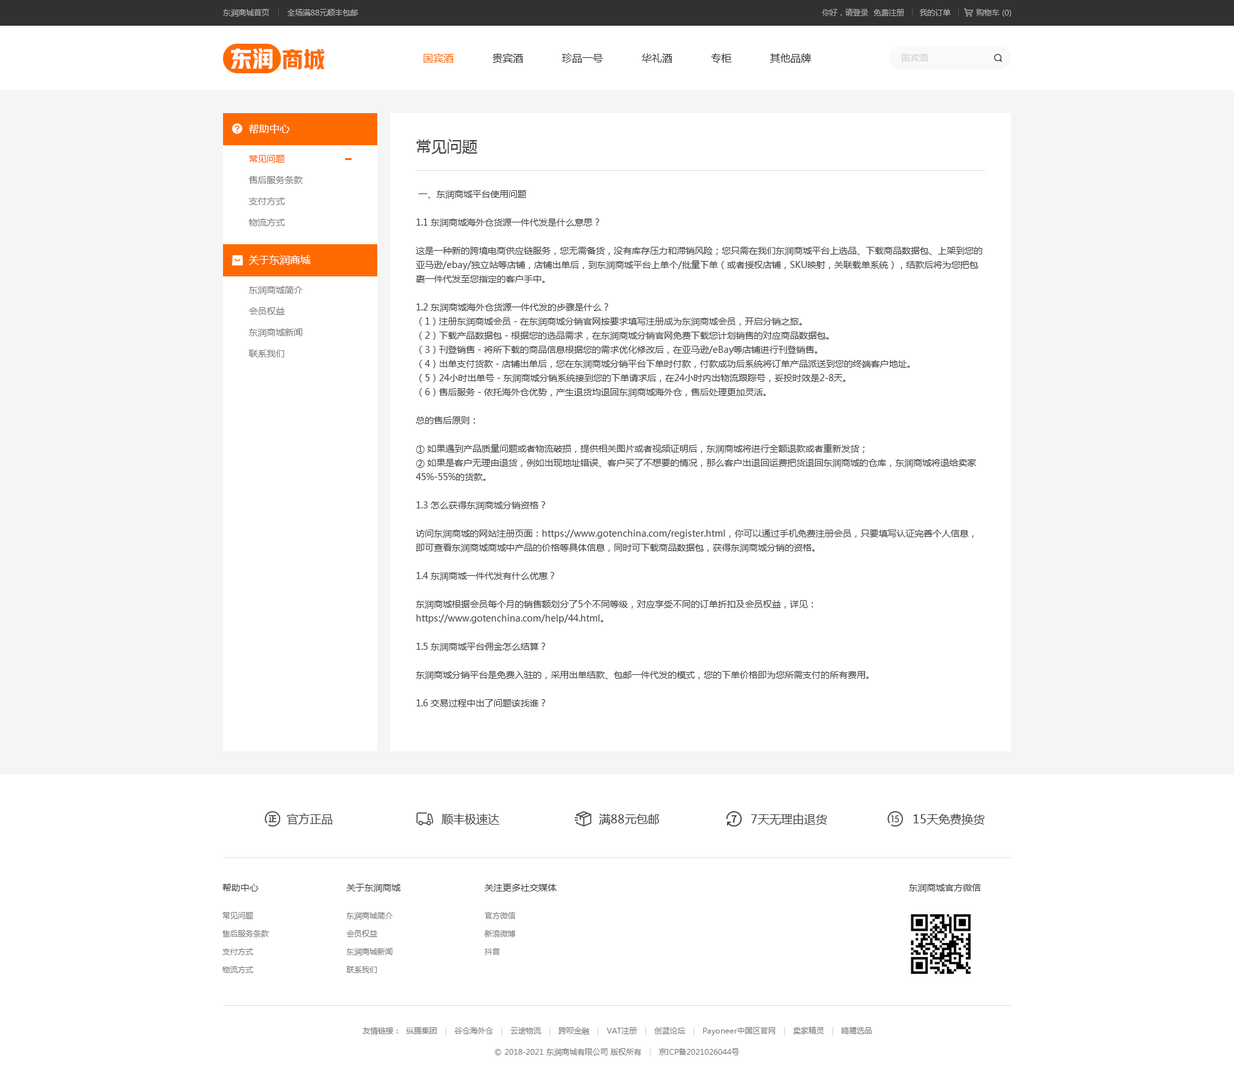
<style>
.page{position:relative;width:1234px;height:1083px;background:#ffffff}
.page>*{position:absolute;margin:0}
.t1{font:7.7px "MicrosoftYaHei";color:#b0b0b0}
.t2{font:7.7px "MicrosoftYaHei";color:#acacac}
.t3{font:21.9px "HYYakuHei-HEW";color:#ffffff}
.t4{font:21.9px "HYYakuHei-HEW";color:#ff6a00}
.t5{font:10.3px "MicrosoftYaHei";color:#333333}
.t6{font:10.3px "MicrosoftYaHei";color:#ff6a00}
.t7{font:9px "MicrosoftYaHei";color:#d2d2d2}
.t8{font:10.3px "MicrosoftYaHei";color:#ffffff}
.t9{font:15.4px "MicrosoftYaHei";color:#434343}
.t10{font:9px/21.2px "MicrosoftYaHei";color:#7d7d7d}
.t11{font:9px/21.2px "MicrosoftYaHei";color:#ff5c00}
.t12{font:9px/14.1px "MicrosoftYaHei";color:#434343}
.t13{font:11.6px "MicrosoftYaHei";color:#434343}
.t14{font:9px "MicrosoftYaHei";color:#434343}
.t15{font:7.7px/18px "MicrosoftYaHei";color:#7d7d7d}
.t16{font:7.7px "MicrosoftYaHei";color:#7d7d7d}
.t17{font:7.7px "MicrosoftYaHei";color:#d2d2d2}
</style>
<div class="page">
<p class="t1" style="left:223px;top:9px;width:135px;height:8px">东润商城首页       全场满88元顺丰包邮</p>
<p class="t2" style="left:822px;top:8px;width:190px;height:9px">你好，请登录  免费注册      我的订单          购物车 (0)</p>
<p class="t3" style="left:231px;top:48px;width:42px;height:21px">东润</p>
<p class="t4" style="left:282px;top:49px;width:43px;height:20px">商城</p>
<p class="t5" style="left:424px;top:53px;width:387px;height:10px"><span class="t6">国宾酒</span>            贵宾酒            珍品一号            华礼酒            专柜            其他品牌</p>
<p class="t7" style="left:902px;top:54px;width:26px;height:8px">国宾酒</p>
<p class="t8" style="left:249px;top:124px;width:41px;height:10px">帮助中心</p>
<p class="t9" style="left:417px;top:139px;width:61px;height:15px">常见问题</p>
<p class="t10" style="left:249px;top:155px;width:54px;height:71px"><span class="t11">常见问题<br></span>售后服务条款<br>支付方式<br>物流方式</p>
<p class="t12" style="left:416px;top:190px;width:567px;height:517px">一、东润商城平台使用问题<br><br>1.1 东润商城海外仓货源一件代发是什么意思？ <br><br>这是一种新的跨境电商供应链服务，您无需备货，没有库存压力和滞销风险；您只需在我们东润商城平台上选品、下载商品数据包、上架到您的亚马逊/ebay/独立站等店铺，店铺出单后，到东润商城平台上单个/批量下单（或者授权店铺，SKU映射，关联载单系统），结款后将为您把包裹一件代发至您指定的客户手中。 <br><br>1.2 东润商城海外仓货源一件代发的步骤是什么？ <br>（1）注册东润商城会员 - 在东润商城分销官网按要求填写注册成为东润商城会员，开启分销之旅。<br>（2）下载产品数据包 - 根据您的选品需求，在东润商城分销官网免费下载您计划销售的对应商品数据包。<br>（3）刊登销售 - 将所下载的商品信息根据您的需求优化修改后，在亚马逊/eBay等店铺进行刊登销售。<br>（4）出单支付货款 - 店铺出单后，您在东润商城分销平台下单时付款，付款成功后系统将订单产品派送到您的终端客户地址。<br>（5）24小时出单号 - 东润商城分销系统接到您的下单请求后，在24小时内出物流跟踪号，妥投时效是2-8天。<br>（6）售后服务 - 依托海外仓优势，产生退货均退回东润商城海外仓，售后处理更加灵活。<br><br>总的售后原则：<br><br>① 如果遇到产品质量问题或者物流破损，提供相关图片或者视频证明后，东润商城将进行全额退款或者重新发货；<br>② 如果是客户无理由退货，例如出现地址错误、客户买了不想要的情况，那么客户出退回运费把货退回东润商城的仓库，东润商城将退给卖家45%-55%的货款。<br><br>1.3 怎么获得东润商城分销资格？<br><br>访问东润商城的网站注册页面：https://www.gotenchina.com/register.html，你可以通过手机免费注册会员，只要填写认证完善个人信息，即可查看东润商城商城中产品的价格等具体信息，同时可下载商品数据包，获得东润商城分销的资格。 <br><br>1.4 东润商城一件代发有什么优惠？ <br><br>东润商城根据会员每个月的销售额划分了5个不同等级，对应享受不同的订单折扣及会员权益，详见：https://www.gotenchina.com/help/44.html。<br><br>1.5 东润商城平台佣金怎么结算？ <br><br>东润商城分销平台是免费入驻的，采用出单结款、包邮一件代发的模式，您的下单价格即为您所需支付的所有费用。 <br><br>1.6 交易过程中出了问题该找谁？ <br><br>如果您在使用东润商城平台的过程中遇到任何问题，可以直接联系您注册时系统为您分配的专属业务经理，谢谢。<br><br><br>二、产品问题<br><br>2.1 东润商城都有什么产品？ <br><br>东润商城平台上目前拥有家居和园艺、体育用品、健康和美容、乐器、汽车配件、玩具类、商业和工业、工艺品、计算机平板电脑和网络、手机配件、消费类电子产品、珠宝和手表、相机类这14条品类线，提供20000+ SKU，每月200+商品上新，详情可查看东润商城官网：https://www.gotenchina.com/ <br><br>2.2 东润商城有提供专业的高清图片和SEO优化的英文标题描述吗？<br><br>东润商城拥有8年的专业商品团队，东润商城平台上的商品图都是1000*1000的高清图，且都有提供相应的商品配图、尺寸、重量等信息；另外，东润商城的商品标题、描述等信息都有作了SEO优化，尽可放心使用。 <br><br>2.3 东润商城平台上的产品有侵权风险吗？ <br><br>东润商城平台上的商品，除品牌商品外，其余的商品都是白牌产品，可以直接销售，不存在侵权风险(除去一款油桶和亚马逊禁卖的宝锋对讲机)。至于品牌商品，东润商城平台均已获得授权，如有计划分销的卖家可联系您的客户经理进行申请授权。 <br><br>2.4 商品库存充足吗？<br><br>东润商城平台上的商品都是经过大数据分析，备货到海外仓，大部分商品的库存都比较充足，但不排除某些商品比较热销，会导致出现暂时缺货的情况，一旦出现缺货情况，及时与您的客户经理沟通并进行库存管理。 <br><br>2.5 如何申请品牌区产品分销权限？ <br><br>您可联系您的客户经理申请开通品牌区产品权限。 <br><br>2.6 如何选择适合在亚马逊或ebay等平台上销售的商品？<br><br>东润商城分销平台首页上有专门的“平台爆款”专区模块，点击“amazon ”或 “ebay” 图标即可进行访问。亦可点击如下链接进行访问选品：<br><br>amazon 平台爆款商品：https://www.gotenchina.com/amazon.html<br><br>ebay 平台爆款商品： https://www.gotenchina.com/ebay.html<br><br>wish 平台爆款商品：https://www.gotenchina.com/wish.html<br><br><br>三、库存问题<br><br>出单了缺货怎么办，库存怎么管控？<br><br>合作是需要有磨合期，我们针对在磨合期的新客户建议选库存多的产品进行推广，分销没办法100%保证完全不缺货，所以库存监控肯定是要做的，做的好的可以用东润商城平台载单，同时可以做跟踪号上传同步，库存的同步或者库存自行设置规则，后续稳定出单后可以合作备货。<br><br>另外，您可将感兴趣的产品加入收藏夹，然后在“个人中心”-“商品管理”，中，便可查看您所收藏的商品库存、预计可售天数、预计到货时间。<br><br><br>四、网站功能对接问题<br><br>3.1 东润商城是否支持ERP对接？ <br><br>东润商城暂不支持第三方ERP软件对接，但支持自主研发ERP技术API对接；市场上的各大ERP已在对接中，后续发布将另行通知，如您有相关需求，可反馈给您的客户经理。 <br><br>3.2 东润商城是否支持一键刊登商品至店铺？ <br><br>东润商城暂无一键刊登功能。不过，东润商城平台上的商品数据包支持批量下载，您可以批量下载数据包，之后通过您使用的ERP软件进行一键刊登。 <br><br>3.3 东润商城是否可以一键上传物流跟踪号至店铺？<br><br>东润商城支持一键上传物流跟踪号至店铺，不过需要您使用东润商城的“平台载单”功能，该功能支持一键抓取Amazon / eBay / Wish平台店铺里的东润商城订单，以及自动上传跟踪号至店铺，详情可登录您的东润商城账户查看：《授权载单操作指引》。<br><br><br>五、物流问题<br><br>1、东润商城包裹运输的物流费用是怎么计算？<br><br>东润商城平台上价格都是非偏远州包邮价格，如果偏远州看具体产品来评定物流，部分产品偏远州无法派送，建议屏蔽偏远州。<br><br>2、东润商城分销平台仓库地址在哪里？<br><br>东润商城平台目前在美国有：美东仓-新泽西、美西仓-洛杉矶、美南仓-亚特兰大；英国有：伯明翰仓；德国仓：迪岑巴赫。更多海外仓信息可查看：https://www.gotenchina.com/help/33.html<br><br>3、东润商城发什么快递，会有跟踪号信息吗，时效怎样？<br><br>东润商城美国仓主要是发Fedex，USPS、UPS为辅，英国主要走Hermes、Royal Mail（皇家物流），德国走DHL。东润商城平台上发货的包裹，基本都是24小时内出物流跟踪号，都可以在官网全程跟踪（一件多票需拆包的订单会稍微延后），非异常情况，美国是2-8天完成妥投，英国和德国是1-3天完成妥投。<br><br>4、东润商城平台退货的物流费用是怎么算的？<br><br>若是因为商品破损等非无理由退货，您可在您的账户里发起退货申诉，系统将给您生成一个退货标签，您可将该退货标签提供给您的终端买家，让终端买家退回到东润商城海外仓即可，该退货费用，由东润商城分销平台承担。<br><br>若您的订单为无理由退货，则需要您联系网站客服申请退货标签，该退货费用将由系统自动测算，且由您自行承担。</p>
<p class="t8" style="left:249px;top:255px;width:61px;height:10px">关于东润商城</p>
<p class="t10" style="left:249px;top:286px;width:54px;height:71px">东润商城简介<br>会员权益<br>东润商城新闻<br>联系我们</p>
<p class="t13" style="left:287px;top:813px;width:45px;height:12px">官方正品</p>
<p class="t13" style="left:442px;top:814px;width:58px;height:11px">顺丰极速达</p>
<p class="t13" style="left:599px;top:814px;width:61px;height:11px">满88元包邮</p>
<p class="t13" style="left:751px;top:813px;width:76px;height:12px">7天无理由退货</p>
<p class="t13" style="left:914px;top:814px;width:71px;height:11px">15天免费换货</p>
<p class="t14" style="left:222px;top:884px;width:36px;height:8px">帮助中心</p>
<p class="t14" style="left:346px;top:884px;width:55px;height:8px">关于东润商城</p>
<p class="t14" style="left:485px;top:884px;width:72px;height:8px">关注更多社交媒体</p>
<p class="t14" style="left:909px;top:884px;width:72px;height:8px">东润商城官方微信</p>
<p class="t15" style="left:222px;top:912px;width:47px;height:61px">常见问题<br>售后服务条款<br>支付方式<br>物流方式</p>
<p class="t15" style="left:346px;top:912px;width:47px;height:61px">东润商城简介<br>会员权益<br>东润商城新闻<br>联系我们</p>
<p class="t15" style="left:485px;top:912px;width:31px;height:43px">官方微信<br>新浪微博<br>抖音</p>
<p class="t16" style="left:363px;top:1027px;width:509px;height:9px">友情链接：  纵腾集团   <span class="t17">|   </span>谷仓海外仓   <span class="t17">|   </span>云途物流   <span class="t17">|   </span>跨呗金融   <span class="t17">|   </span>VAT注册   <span class="t17">|   </span>创蓝论坛   <span class="t17">|   </span>Payoneer中国区官网   <span class="t17">|   </span>卖家精灵   <span class="t17">|   </span>鸥鹭选品</p>
<p class="t16" style="left:495px;top:1048px;width:244px;height:9px">© 2018-2021 东润商城有限公司 版权所有   <span class="t17">|   </span>京ICP备2021026044号</p>
</div>
